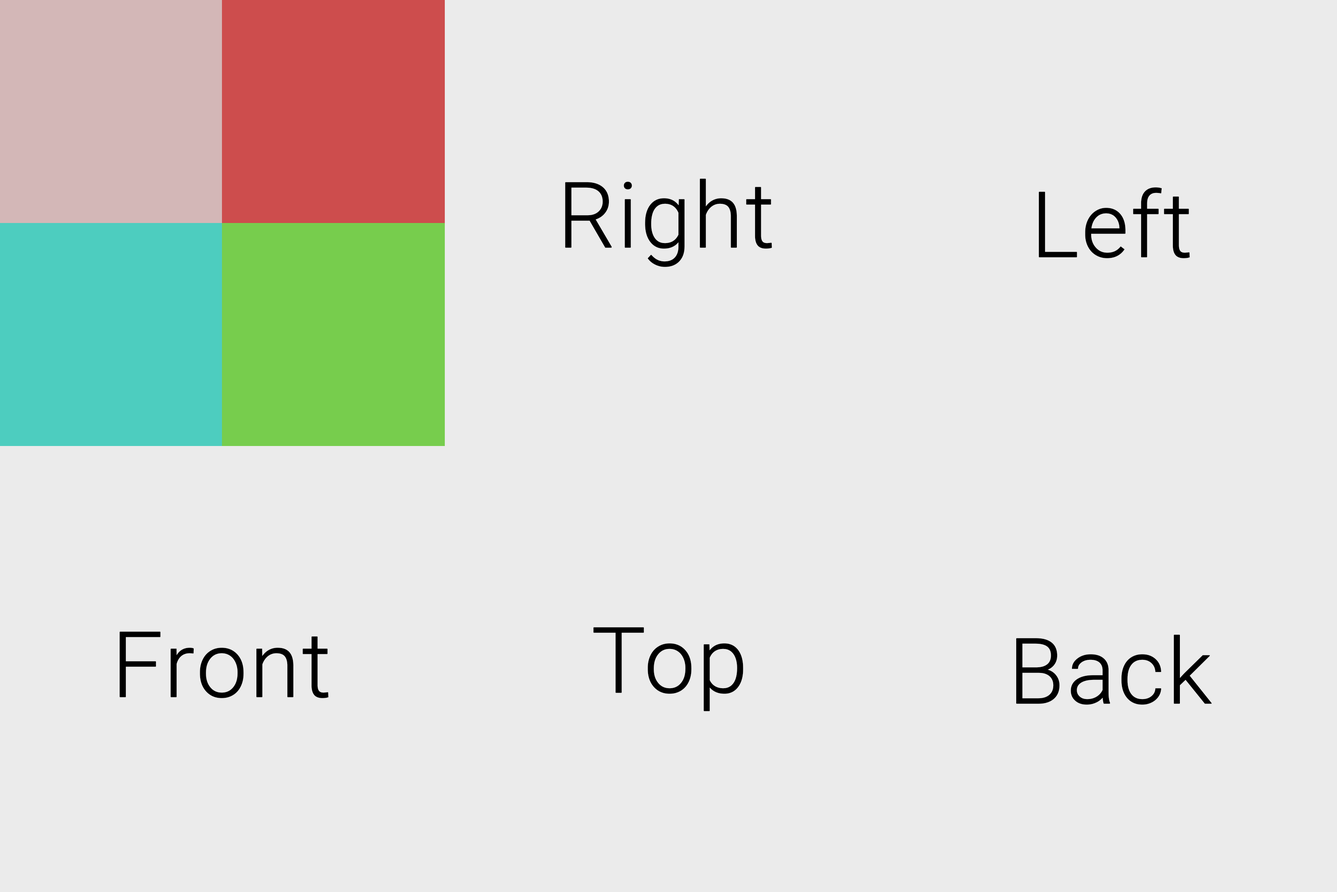
<style>
.page{position:relative;width:1337px;height:892px;background:#ebebeb}
.page>*{position:absolute;margin:0}
.t1{font:90.9px "Roboto-Light";color:#000000;font-weight:bold}
</style>
<div class="page">
<p class="t1" style="left:565px;top:178px;width:207px;height:89px">Right</p>
<p class="t1" style="left:1039px;top:187px;width:151px;height:71px">Left</p>
<p class="t1" style="left:593px;top:627px;width:151px;height:84px">Top</p>
<p class="t1" style="left:119px;top:631px;width:210px;height:67px">Front</p>
<p class="t1" style="left:1016px;top:634px;width:196px;height:70px">Back</p>
</div>
